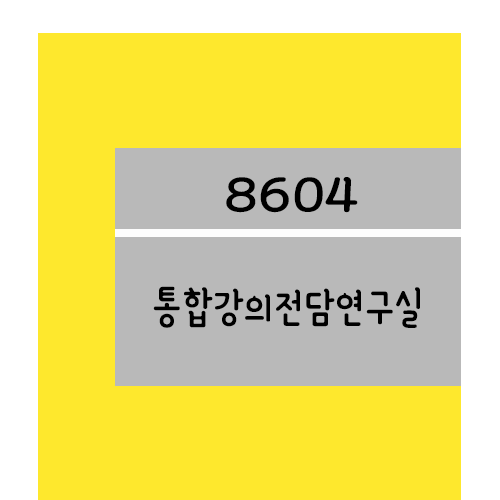
<style>
.page{position:relative;width:500px;height:500px;background:#fee82d}
.page>*{position:absolute;margin:0}
.t1{font:61.2px "YanoljaYacheR";color:#000000;scale:1.18 1}
.t2{font:48px "YanoljaYacheR";color:#000000}
</style>
<div class="page">
<p class="t1" style="left:226px;top:177px;width:132px;height:36px">8604</p>
<p class="t2" style="left:153px;top:286px;width:267px;height:42px">통합강의전담연구실</p>
</div>
